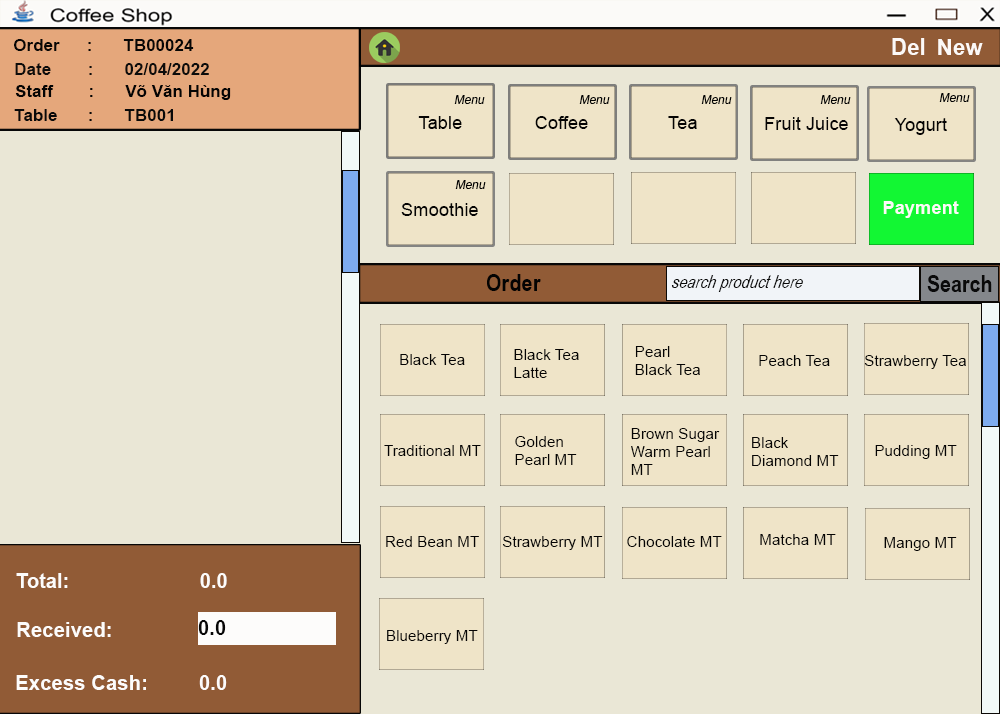
<style>
.page{position:relative;width:1000px;height:714px;background:#eae7d6}
.page>*{position:absolute;margin:0}
.t1{font:17px "Arial-BoldMT";color:#070605}
.t2{font:22.7px "Arial-BoldMT";color:#fcf9f7}
.t3{font:22.4px "Arial-BoldMT";color:#fcf9f7}
.t4{font:17px "Arial-BoldMT";color:#0c0c0b}
.t5{font:17px "Arial-BoldMT";color:#040404}
.t6{font:12px "ArialMT";color:#030303;font-style:italic}
.t7{font:11.8px "ArialMT";color:#030303;font-style:italic}
.t8{font:17px "Arial-BoldMT";color:#090909}
.t9{font:18.4px "ArialMT";color:#050404}
.t10{font:24.5px "ArialNarrow-Bold";color:#030303}
.t11{font:18px "ArialNarrow-Italic";color:#0a0a0a;font-style:italic}
.t12{font:24px "ArialNarrow-Bold";color:#0a0a0a}
.t13{font:15.3px "ArialMT";color:#050404}
.t14{font:15.3px "ArialMT";color:#040404}
.t15{font:20px "Arial-BoldMT";color:#fdfcfb}
.t16{font:20.4px "Arial-BoldMT";color:#fdfcfb}
.t17{font:20.4px "Arial-BoldMT";color:#070707}
</style>
<div class="page">
<p class="t1" style="left:14px;top:39px;width:180px;height:12px">Order : TB00024</p>
<p class="t2" style="left:892px;top:38px;width:33px;height:17px">Del</p>
<p class="t3" style="left:938px;top:39px;width:45px;height:16px">New</p>
<p class="t4" style="left:15px;top:63px;width:194px;height:12px">Date :  02/04/2022</p>
<p class="t5" style="left:15px;top:85px;width:216px;height:15px">Staff :  Võ Văn Hùng</p>
<p class="t6" style="left:454px;top:95px;width:31px;height:9px">Menu</p>
<p class="t7" style="left:579px;top:95px;width:31px;height:9px">Menu</p>
<p class="t7" style="left:701px;top:95px;width:31px;height:9px">Menu</p>
<p class="t7" style="left:820px;top:95px;width:31px;height:9px">Menu</p>
<p class="t7" style="left:939px;top:93px;width:31px;height:9px">Menu</p>
<p class="t8" style="left:14px;top:109px;width:159px;height:12px">Table : TB001</p>
<p class="t9" style="left:418px;top:116px;width:44px;height:13px">Table</p>
<p class="t9" style="left:535px;top:116px;width:53px;height:13px">Coffee</p>
<p class="t7" style="left:455px;top:180px;width:31px;height:9px">Menu</p>
<p class="t9" style="left:401px;top:203px;width:77px;height:13px">Smoothie</p>
<p class="t10" style="left:487px;top:274px;width:54px;height:17px">Order</p>
<p class="t11" style="left:671px;top:275px;width:132px;height:17px">search product here</p>
<p class="t12" style="left:927px;top:275px;width:65px;height:17px">Search</p>
<p class="t13" style="left:514px;top:349px;width:65px;height:29px">Black Tea<br>Latte</p>
<p class="t13" style="left:635px;top:346px;width:65px;height:29px">Pearl <br>Black Tea</p>
<p class="t13" style="left:400px;top:354px;width:65px;height:11px">Black Tea</p>
<p class="t14" style="left:759px;top:355px;width:71px;height:11px">Peach Tea</p>
<p class="t14" style="left:864px;top:355px;width:102px;height:14px">Strawberry Tea</p>
<p class="t13" style="left:515px;top:436px;width:62px;height:29px">Golden<br>Pearl MT</p>
<p class="t13" style="left:631px;top:428px;width:89px;height:47px">Brown Sugar<br>Warm Pearl <br>MT</p>
<p class="t13" style="left:752px;top:437px;width:87px;height:29px">Black<br>Diamond MT</p>
<p class="t13" style="left:384px;top:445px;width:97px;height:11px">Traditional MT</p>
<p class="t13" style="left:875px;top:445px;width:82px;height:14px">Pudding MT</p>
<p class="t13" style="left:760px;top:534px;width:76px;height:11px">Matcha MT</p>
<p class="t13" style="left:386px;top:536px;width:93px;height:11px">Red Bean MT</p>
<p class="t13" style="left:502px;top:536px;width:101px;height:14px">Strawberry MT</p>
<p class="t13" style="left:627px;top:536px;width:95px;height:11px">Chocolate MT</p>
<p class="t13" style="left:884px;top:537px;width:73px;height:14px">Mango MT</p>
<p class="t15" style="left:16px;top:573px;width:211px;height:15px">Total:                   0.0</p>
<p class="t16" style="left:17px;top:622px;width:94px;height:15px">Received:</p>
<p class="t17" style="left:198px;top:620px;width:28px;height:15px">0.0</p>
<p class="t13" style="left:387px;top:630px;width:91px;height:14px">Blueberry MT</p>
<p class="t16" style="left:16px;top:675px;width:211px;height:15px">Excess Cash:  0.0</p>
</div>
